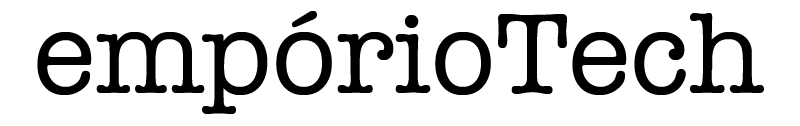
<style>
.page{position:relative;width:800px;height:126px;background:#ffffff}
.page>*{position:absolute;margin:0}
.t1{font:117.7px "AmericanTypewriter";color:#000000}
</style>
<div class="page">
<p class="t1" style="left:37px;top:11px;width:727px;height:103px">empórioTech</p>
</div>
